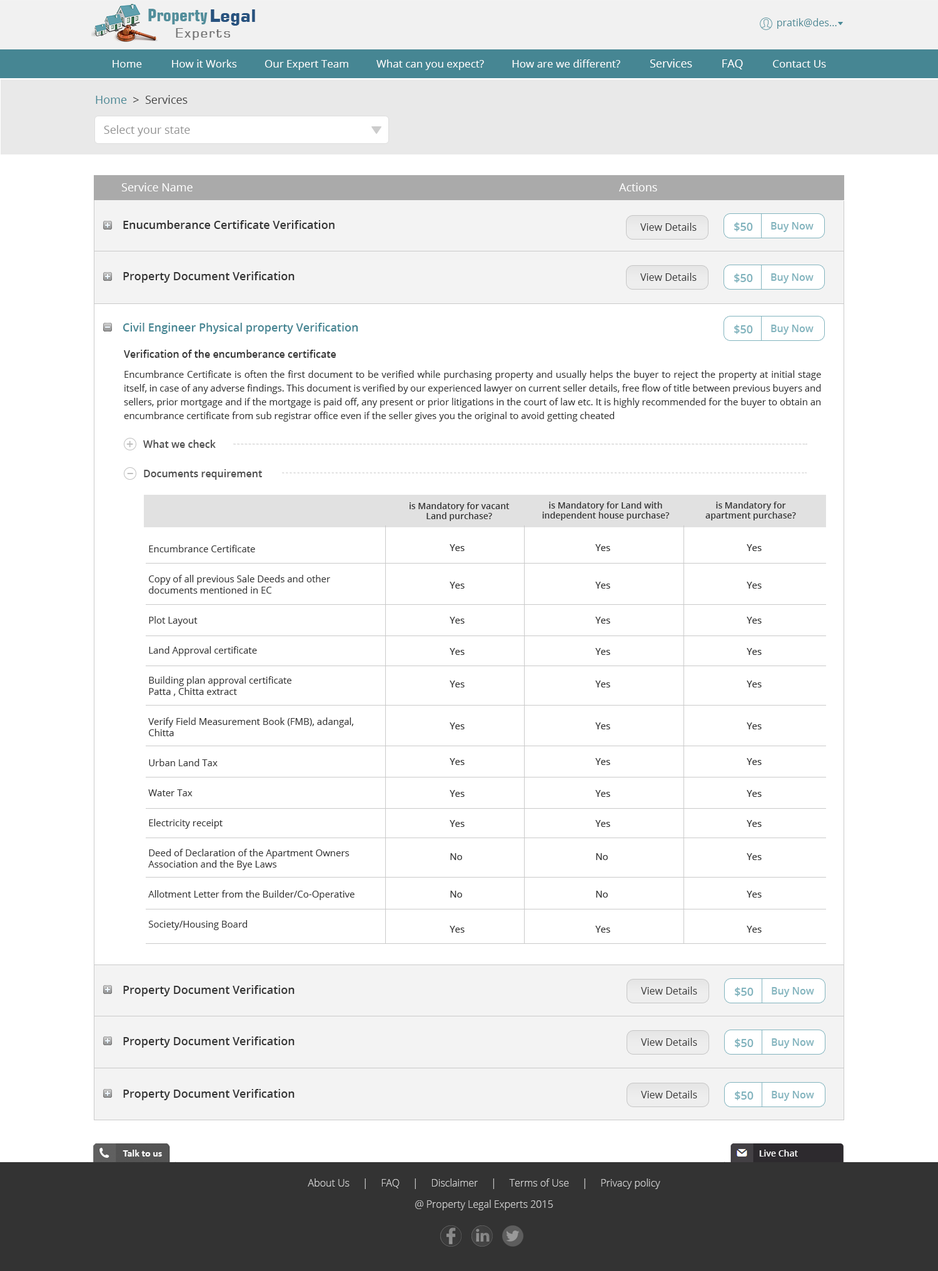
<style>
.page{position:relative;width:938px;height:1271px;background:#ffffff}
.page>*{position:absolute;margin:0}
.t1{font:17.5px "Square721BT-BoldCondensed";color:#528e9b}
.t2{font:17.5px "Square721BT-Bold";color:#27527f}
.t3{font:12.5px "Square721BT-Roman";letter-spacing:0.1em;color:#6e6e6e}
.t4{font:10px "OpenSans";color:#468693}
.t5{font:11.3px "OpenSans";color:#404040}
.t6{font:11.3px "OpenSans";color:#468693}
.t7{font:11.3px "OpenSans";color:#939393}
.t8{font:11.3px "OpenSans";color:#ffffff}
.t9{font:11.3px "OpenSans-Semibold";color:#333333}
.t10{font:10px "OpenSans";color:#333333}
.t11{font:11.3px "OpenSans-Semibold";color:#82b4be}
.t12{font:10px "OpenSans-Semibold";color:#82b4be}
.t13{font:11.3px "OpenSans-Semibold";color:#468693}
.t14{font:10px "OpenSans-Semibold";color:#333333}
.t15{font:9.4px/13.8px "OpenSans";color:#333333}
.t16{font:12.5px "OpenSans-Semibold";color:#bfbfbf}
.t17{font:10px "OpenSans-Semibold";color:#4e4e4e}
.t18{font:8.8px "OpenSans-Semibold";color:#333333}
.t19{font:8.8px/22.5px "OpenSans-Semibold";color:#333333}
.t20{font:9.4px/30px "OpenSans";color:#333333}
.t21{font:9.4px "OpenSans";color:#333333}
</style>
<div class="page">
<p class="t1" style="left:148px;top:9px;width:60px;height:15px">Property</p>
<p class="t2" style="left:211px;top:9px;width:44px;height:17px">Legal</p>
<p class="t3" style="left:176px;top:28px;width:54px;height:12px">Experts</p>
<p class="t3" style="left:176px;top:28px;width:55px;height:12px">Experts</p>
<p class="t4" style="left:777px;top:18px;width:60px;height:11px">pratik@des...</p>
<p class="t5" style="left:96px;top:95px;width:92px;height:9px"><span class="t6">Home</span>  &gt;  Services</p>
<p class="t7" style="left:104px;top:125px;width:86px;height:11px">Select your state</p>
<p class="t8" style="left:121px;top:183px;width:72px;height:8px">Service Name</p>
<p class="t8" style="left:619px;top:183px;width:38px;height:8px">Actions</p>
<p class="t9" style="left:123px;top:220px;width:212px;height:9px">Enucumberance Certificate Verification</p>
<p class="t10" style="left:640px;top:223px;width:57px;height:8px">View Details</p>
<p class="t11" style="left:734px;top:222px;width:19px;height:9px">$50</p>
<p class="t12" style="left:771px;top:222px;width:43px;height:10px">Buy Now</p>
<p class="t9" style="left:123px;top:271px;width:172px;height:12px">Property Document Verification</p>
<p class="t10" style="left:640px;top:273px;width:57px;height:8px">View Details</p>
<p class="t11" style="left:734px;top:273px;width:19px;height:10px">$50</p>
<p class="t12" style="left:771px;top:273px;width:43px;height:10px">Buy Now</p>
<p class="t13" style="left:123px;top:323px;width:235px;height:11px">Civil Engineer Physical property Verification</p>
<p class="t11" style="left:734px;top:325px;width:19px;height:9px">$50</p>
<p class="t12" style="left:771px;top:325px;width:43px;height:10px">Buy Now</p>
<p class="t14" style="left:124px;top:350px;width:213px;height:8px">Verification of the encumberance certificate</p>
<p class="t15" style="left:124px;top:370px;width:697px;height:52px;text-align:justify">Encumbrance Certificate is often the first document to be verified while purchasing property and usually helps the buyer to reject the property at initial stage itself, in case of any adverse findings. This document is verified by our experienced lawyer on current seller details, free flow of title between previous buyers and sellers, prior mortgage and if the mortgage is paid off, any present or prior litigations in the court of law etc. It is highly recommended for the buyer to obtain an encumbrance certificate from sub registrar office even if the seller gives you the original to avoid getting cheated</p>
<p class="t16" style="left:126px;top:441px;width:7px;height:6px">+</p>
<p class="t17" style="left:143px;top:440px;width:73px;height:8px">What we check</p>
<p class="t17" style="left:144px;top:469px;width:118px;height:11px">Documents requirement</p>
<p class="t18" style="left:410px;top:502px;width:100px;height:19px;text-align:center">is Mandatory for vacant Land purchase?</p>
<p class="t18" style="left:542px;top:502px;width:128px;height:18px;text-align:center"><span class="t19">is Mandatory for Land with </span>independent house purchase?</p>
<p class="t18" style="left:706px;top:502px;width:90px;height:18px;text-align:center"><span class="t19">is Mandatory for </span>apartment purchase?</p>
<p class="t20" style="left:148px;top:545px;width:207px;height:385px">Encumbrance Certificate<br>Copy of all previous Sale Deeds and other <span class="t21">documents mentioned in EC<br></span>Plot Layout<br>Land Approval certificate<br>Building plan approval certificate<br><span class="t21">Patta , Chitta extract<br></span>Verify Field Measurement Book (FMB), adangal, <span class="t21">Chitta<br></span>Urban Land Tax<br>Water Tax<br>Electricity receipt<br>Deed of Declaration of the Apartment Owners <span class="t21">Association and the Bye Laws<br></span>Allotment Letter from the Builder/Co-Operative Society/Housing Board<br>Possession letter from builder to 1st seller<br>Original ID proof and address proof to be shown<br>Original deed documents to be shown</p>
<p class="t9" style="left:123px;top:985px;width:172px;height:11px">Property Document Verification</p>
<p class="t10" style="left:641px;top:986px;width:56px;height:9px">View Details</p>
<p class="t11" style="left:735px;top:987px;width:19px;height:9px">$50</p>
<p class="t12" style="left:772px;top:987px;width:42px;height:10px">Buy Now</p>
<p class="t9" style="left:123px;top:1036px;width:172px;height:12px">Property Document Verification</p>
<p class="t10" style="left:641px;top:1038px;width:56px;height:8px">View Details</p>
<p class="t11" style="left:735px;top:1038px;width:19px;height:10px">$50</p>
<p class="t12" style="left:772px;top:1038px;width:42px;height:10px">Buy Now</p>
<p class="t9" style="left:123px;top:1089px;width:172px;height:11px">Property Document Verification</p>
<p class="t10" style="left:641px;top:1090px;width:56px;height:8px">View Details</p>
<p class="t11" style="left:735px;top:1091px;width:19px;height:9px">$50</p>
<p class="t12" style="left:772px;top:1091px;width:42px;height:10px">Buy Now</p>
</div>
